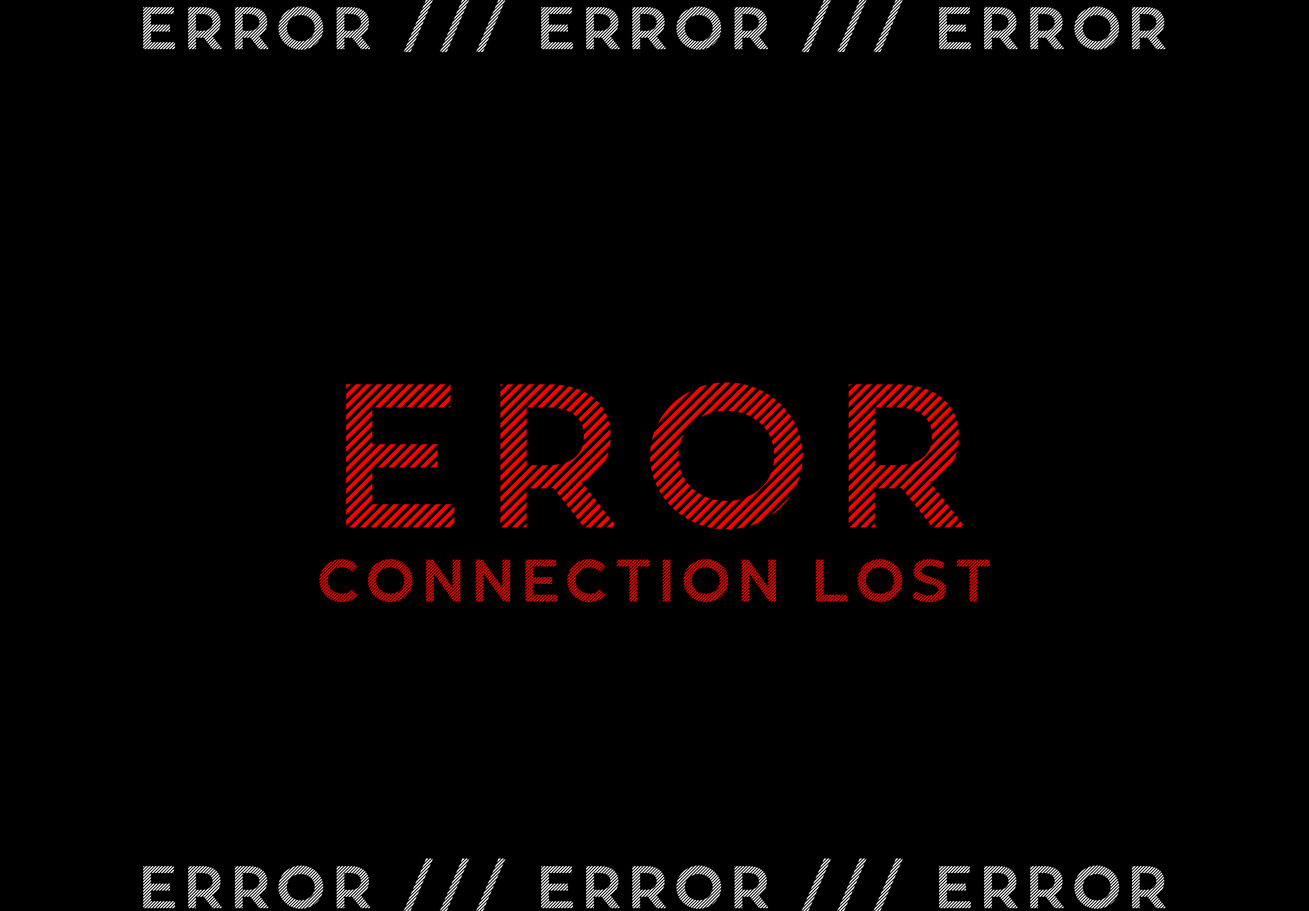
<style>
.page{position:relative;width:1309px;height:911px;background:#000000}
.page>*{position:absolute;margin:0}
.t1{font:59.8px "Revoxa-Strip";letter-spacing:0.12em;color:#ffffff}
.t2{font:204.5px "Revoxa-Strip";letter-spacing:0.12em;color:#ff0000}
.t3{font:59.8px "Revoxa-Strip";letter-spacing:0.12em;color:#ff0000}
</style>
<div class="page">
<p class="t1" style="left:143px;top:0px;width:1022px;height:53px">ERROR /// ERROR /// ERROR</p>
<p class="t2" style="left:346px;top:383px;width:617px;height:147px">EROR</p>
<p class="t3" style="left:319px;top:559px;width:671px;height:43px">connection lost</p>
<p class="t1" style="left:143px;top:859px;width:1022px;height:53px">ERROR /// ERROR /// ERROR</p>
</div>
